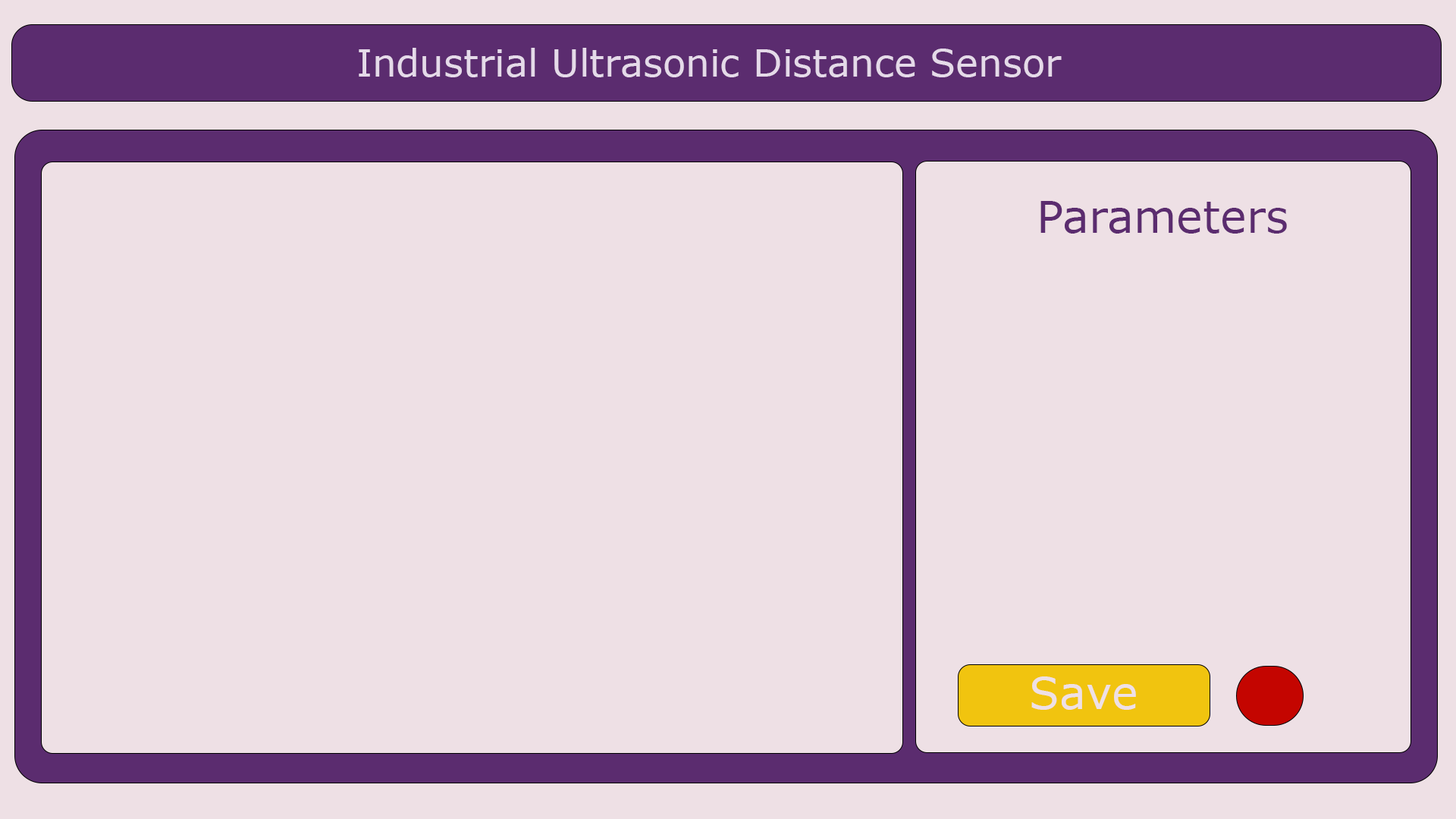
<style>
.page{position:relative;width:1456px;height:819px;background:#eee0e5}
.page>*{position:absolute;margin:0}
.t1{font:37.9px "Verdana";color:#e5dae9}
.t2{font:44.2px "Verdana";color:#5b2c6f}
.t3{font:44.2px "Verdana";color:#eee0e5}
</style>
<div class="page">
<p class="t1" style="left:359px;top:48px;width:703px;height:29px">Industrial Ultrasonic Distance Sensor</p>
<p class="t2" style="left:1040px;top:201px;width:247px;height:33px">Parameters</p>
<p class="t3" style="left:1031px;top:676px;width:105px;height:34px">Save</p>
</div>
